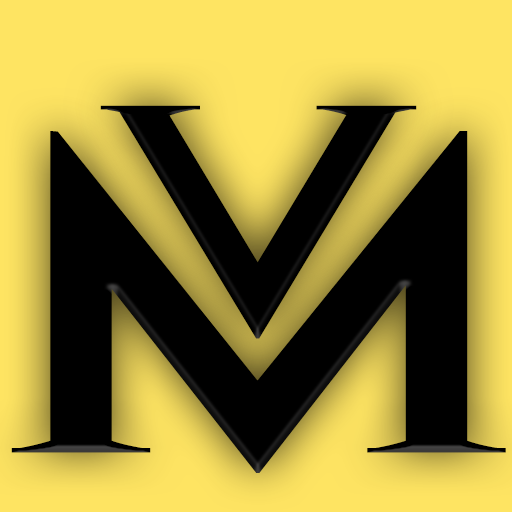
<style>
.page{position:relative;width:512px;height:512px;background:#000000}
.page>*{position:absolute;margin:0}
.t1{font:431.3px "BlackHoleBB";color:#000000}
.t2{font:601.6px "BlackHoleBB";color:#000000;scale:1.03 1}
</style>
<div class="page">
<p class="t1" style="left:100px;top:105px;width:317px;height:234px">V</p>
<p class="t2" style="left:11px;top:131px;width:495px;height:342px">M</p>
</div>
